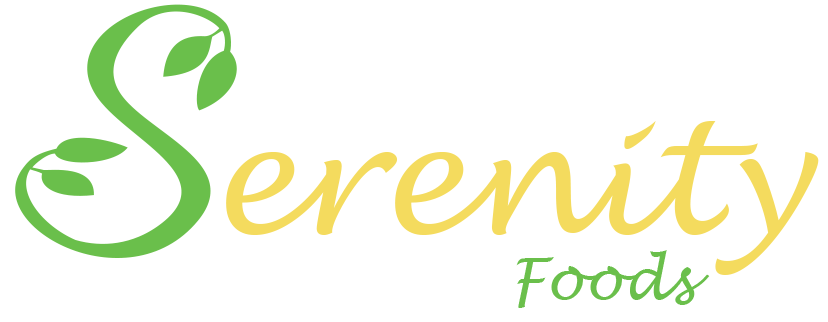
<style>
.page{position:relative;width:828px;height:322px;background:#ffffff}
.page>*{position:absolute;margin:0}
.t1{font:578px "Leafyction-Demo";color:#6abf4b;scale:1.19 1}
.t2{font:150px "LucidaHandwriting-Italic";color:#f4db5e}
.t3{font:58.3px "LucidaHandwriting-Italic";color:#6abf4b}
</style>
<div class="page">
<p class="t1" style="left:15px;top:4px;width:222px;height:254px;rotate:3deg">S</p>
<p class="t2" style="left:226px;top:121px;width:593px;height:154px">erenity</p>
<p class="t3" style="left:516px;top:250px;width:194px;height:58px">Foods</p>
</div>
